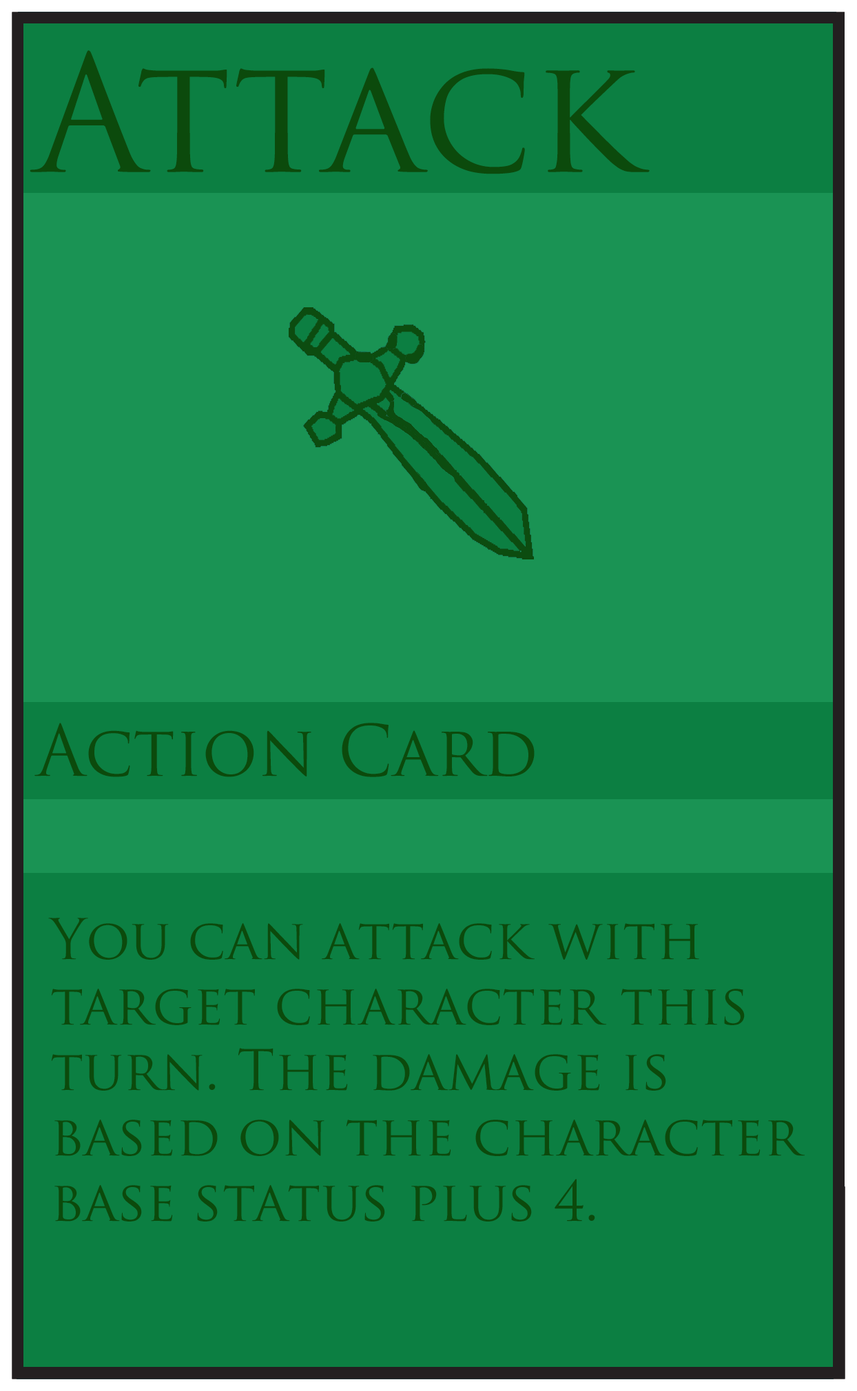
<style>
.page{position:relative;width:857px;height:1391px;background:#0c7f42}
.page>*{position:absolute;margin:0}
.t1{font:157.9px "TrajanPro-Regular";color:#0c4a0c}
.t2{font:68.9px "TrajanPro-Regular";color:#0c4a0c}
.t3{font:54.5px "TrajanPro-Regular";color:#0c4a0c}
</style>
<div class="page">
<p class="t1" style="left:30px;top:50px;width:620px;height:124px">Attack</p>
<p class="t2" style="left:34px;top:723px;width:501px;height:54px">Action Card</p>
<p class="t3" style="left:48px;top:918px;width:757px;height:304px">You can attack with <br>target character this <br>turn. The damage is <br>based on the character <br>base status plus 4.</p>
</div>
